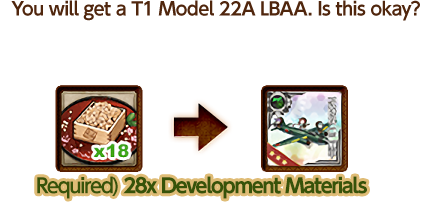
<style>
.page{position:relative;width:432px;height:202px;background:#ffffff}
.page>*{position:absolute;margin:0}
.t1{font:18px "UDShinGoPro-DeBold";letter-spacing:-0.04em;color:#50260d}
.t2{font:20px "UDShinGoPro-Bold";letter-spacing:-0.08em;color:#375309}
.t3{font:20px "UDShinGoPro-DeBold";letter-spacing:-0.08em;color:#375309}
</style>
<div class="page">
<p class="t1" style="left:11px;top:0px;width:409px;height:21px">You will get a T1 Model 22A LBAA. Is this okay?</p>
<p class="t2" style="left:37px;top:176px;width:330px;height:23px"><span class="t3">Required) </span>28x Development Materials</p>
</div>
